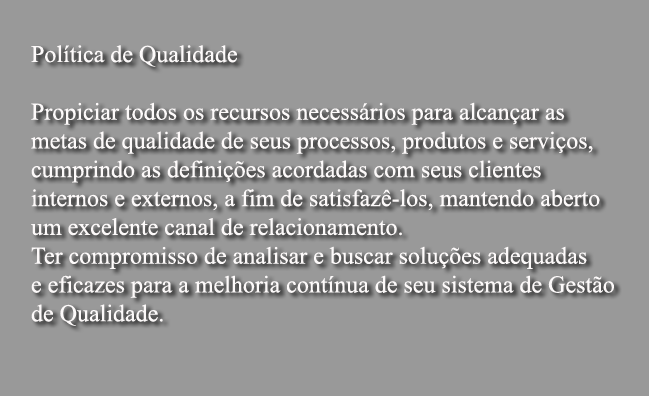
<style>
.page{position:relative;width:649px;height:396px;background:#999999}
.page>*{position:absolute;margin:0}
.t1{font:24px "TimesNewRomanPSMT";color:#fdfafa}
</style>
<div class="page">
<p class="t1" style="left:31px;top:45px;width:583px;height:281px">Política de Qualidade<br><br>Propiciar todos os recursos necessários para alcançar as <br>metas de qualidade de seus processos, produtos e serviços, <br>cumprindo as definições acordadas com seus clientes <br>internos e externos, a fim de satisfazê-los, mantendo aberto <br>um excelente canal de relacionamento.<br>Ter compromisso de analisar e buscar soluções adequadas <br>e eficazes para a melhoria contínua de seu sistema de Gestão <br>de Qualidade.</p>
</div>
